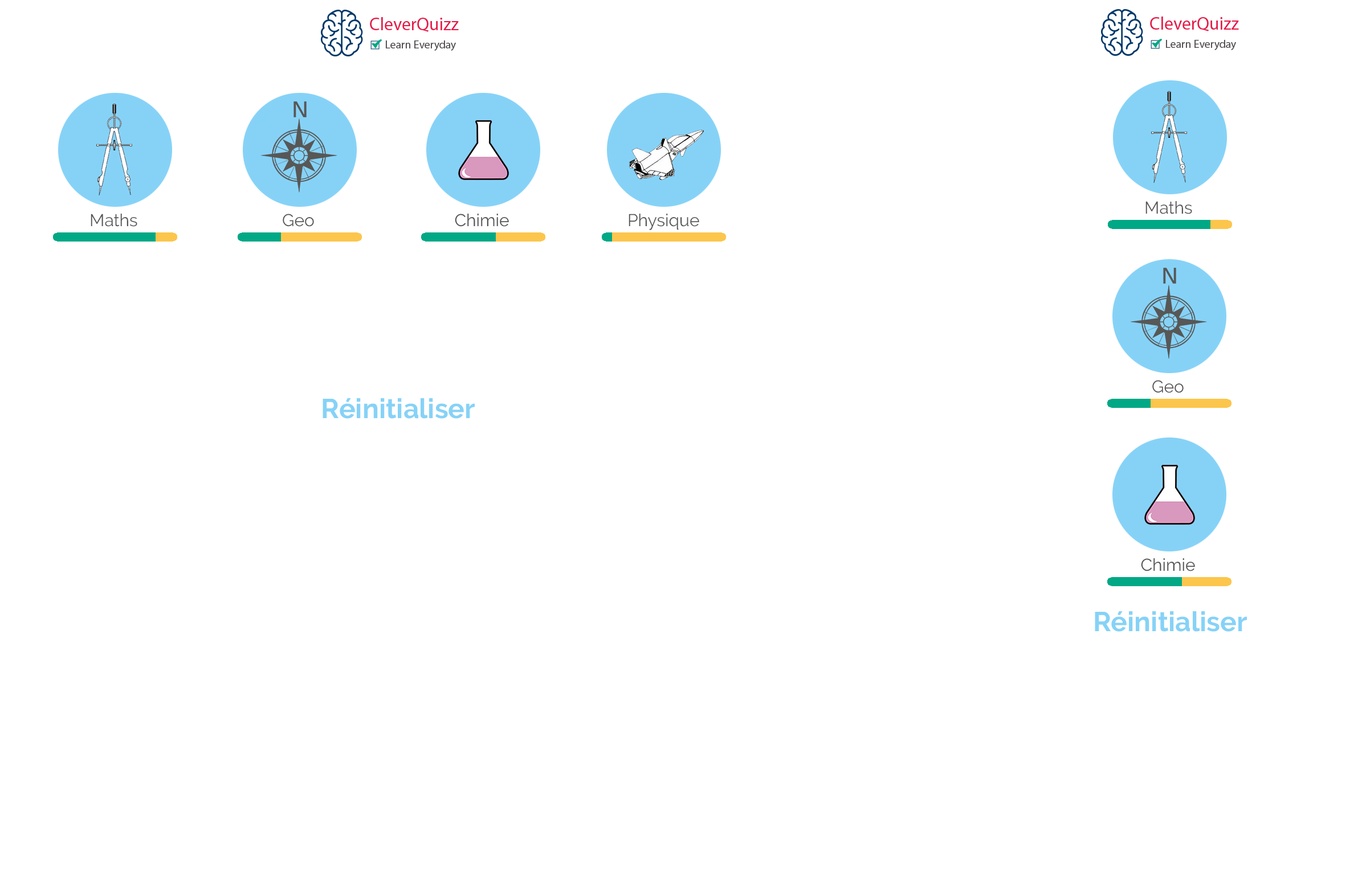
<style>
.page{position:relative;width:1362px;height:875px;background:#ffffff}
.page>*{position:absolute;margin:0}
.t1{font:17.1px "Raleway-Regular";color:#555555}
.t2{font:27.4px "Raleway-Bold";color:#86d2f7}
</style>
<div class="page">
<p class="t1" style="left:1146px;top:201px;width:46px;height:13px">Maths</p>
<p class="t1" style="left:91px;top:214px;width:46px;height:13px">Maths</p>
<p class="t1" style="left:283px;top:214px;width:31px;height:13px">Geo</p>
<p class="t1" style="left:629px;top:214px;width:70px;height:16px">Physique</p>
<p class="t1" style="left:1152px;top:380px;width:32px;height:13px">Geo</p>
<p class="t2" style="left:323px;top:398px;width:152px;height:21px">Réinitialiser</p>
<p class="t2" style="left:1095px;top:612px;width:152px;height:20px">Réinitialiser</p>
</div>
